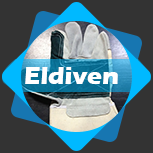
<style>
.page{position:relative;width:153px;height:153px;background:#333333}
.page>*{position:absolute;margin:0}
.t1{font:25px "ErasITC-Bold";color:#ffffff}
</style>
<div class="page">
<p class="t1" style="left:25px;top:67px;width:93px;height:17px">Eldiven</p>
</div>
